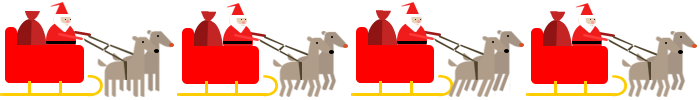
<style>
.page{position:relative;width:700px;height:100px;background:#ffffff}
.page>*{position:absolute;margin:0}
.t1{font:31.3px "Skia-Regular";color:#ffcc00}
.t2{font:31px "Skia-Regular";color:#ffcc00}
</style>
<div class="page">
<p class="t1" style="left:87px;top:75px;width:16px;height:22px;rotate:180deg">C</p>
<p class="t2" style="left:263px;top:75px;width:15px;height:22px;rotate:180deg">C</p>
<p class="t1" style="left:438px;top:75px;width:16px;height:22px;rotate:180deg">C</p>
<p class="t2" style="left:612px;top:75px;width:15px;height:22px;rotate:180deg">C</p>
</div>
